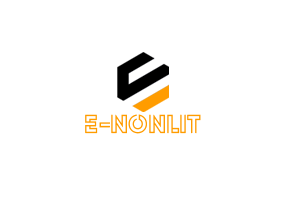
<style>
.page{position:relative;width:300px;height:200px;background:#ffffff}
.page>*{position:absolute;margin:0}
.t1{font:28.5px "NEONLEDLightRegular";color:#ff9c00}
</style>
<div class="page">
<p class="t1" style="left:85px;top:114px;width:116px;height:20px">e-nonlit</p>
</div>
